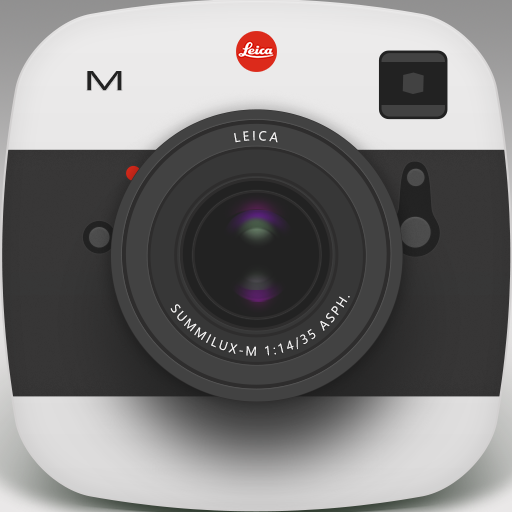
<style>
.page{position:relative;width:512px;height:512px}
.page>*{position:absolute;margin:0}
.t1{font:25.5px "MicrosoftYaHei";color:#222222;scale:1.74 1}
.t2{font:12.3px "MicrosoftYaHei";letter-spacing:0.2em;color:#f7f6f6}
.t3{font:12.2px "MicrosoftYaHei";letter-spacing:0.2em;color:#f7f6f6;scale:0.96 1}
</style>
<div class="page">
<p class="t1" style="left:87px;top:71px;width:35px;height:20px">M</p>
<p class="t2" style="left:234px;top:131px;width:44px;height:12px">LEICA</p>
<p class="t3" style="left:170px;top:296px;width:180px;height:60px;rotate:-1deg">SUMMILUX-M 1:14/35 ASPH.</p>
</div>
